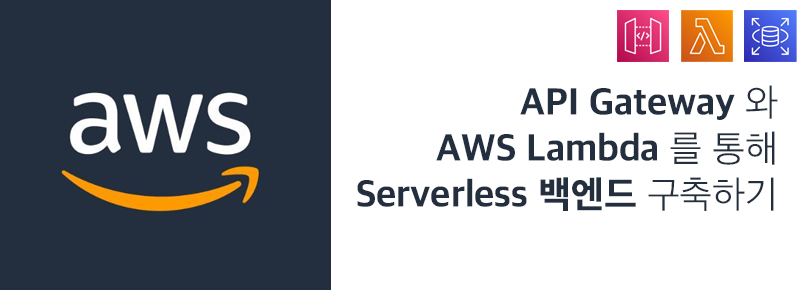
<style>
.page{position:relative;width:807px;height:290px;background:#ffffff}
.page>*{position:absolute;margin:0}
.t1{font:38px "AppleSDGothicNeoEB00";color:#232f3f}
.t2{font:38px "AppleSDGothicNeoL00";color:#232f3f}
</style>
<div class="page">
<p class="t1" style="left:357px;top:85px;width:421px;height:126px;text-align:right">API Gateway<span class="t2"> 와<br></span>AWS Lambda<span class="t2"> 를 통해<br></span>Serverless 백엔드<span class="t2"> 구축하기</span></p>
</div>
